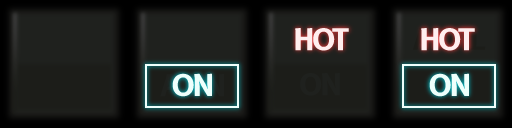
<style>
.page{position:relative;width:512px;height:128px}
.page>*{position:absolute;margin:0}
.t1{font:29.2px "B612-Bold";letter-spacing:-0.075em}
.t2{font:29.2px "B612-Bold";letter-spacing:-0.075em;color:#1f211e}
</style>
<div class="page">
<p class="t1" style="left:297px;top:28px;width:54px;height:23px">HOT</p>
<p class="t2" style="left:300px;top:73px;width:40px;height:23px">ON</p>
</div>
